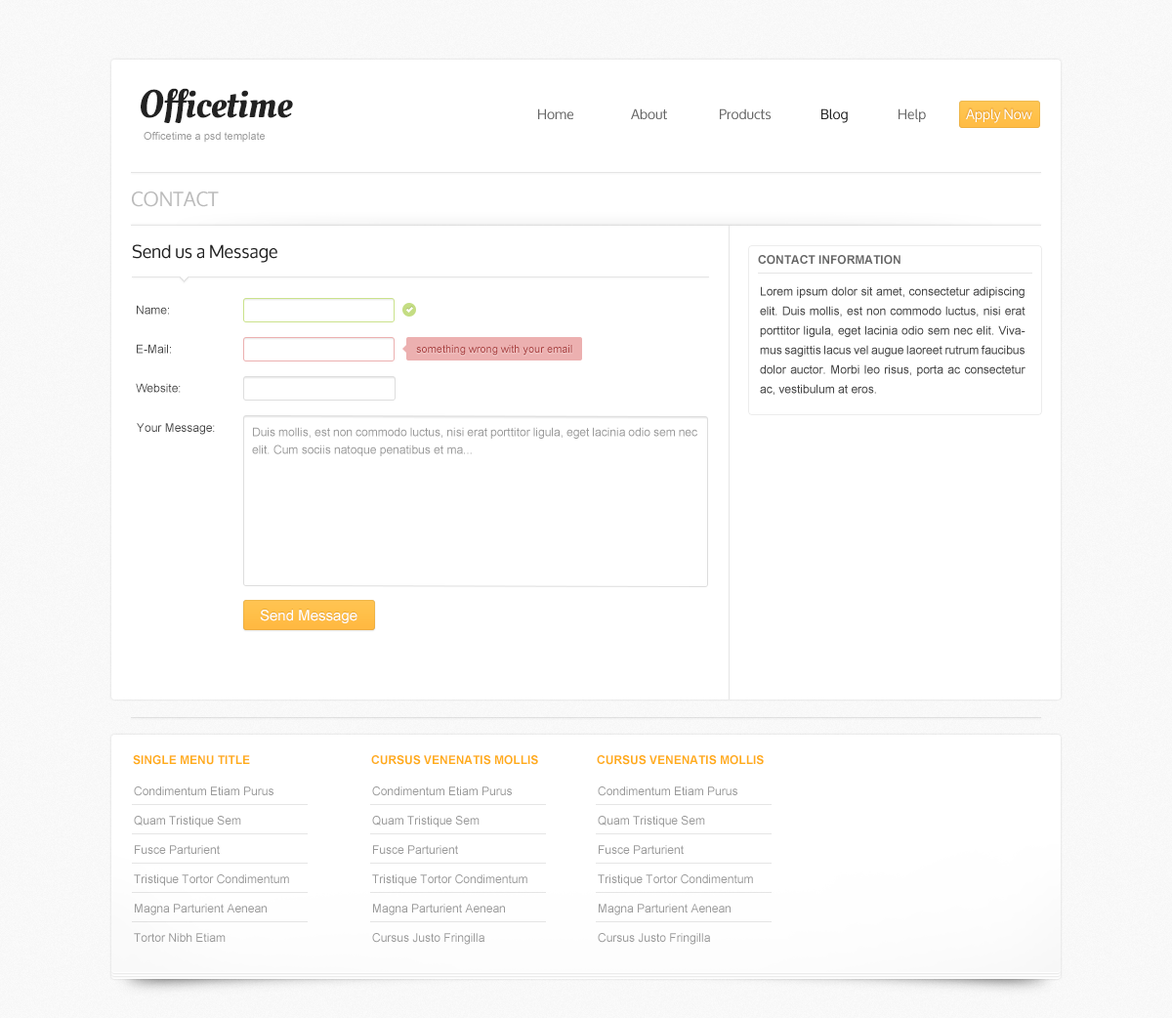
<style>
.page{position:relative;width:1172px;height:1018px;background:#ffffff}
.page>*{position:absolute;margin:0}
.t1{font:39.1px "OleoScript-Regular";color:#222222}
.t2{font:13.7px "Oxygen";color:#666666}
.t3{font:13.7px "Oxygen";color:#222222}
.t4{font:13.7px "Oxygen";color:#ffffff}
.t5{font:10.7px "ArialMT";color:#999999}
.t6{font:19.5px "Oxygen";color:#bbbbbb;text-transform:uppercase}
.t7{font:17.6px "Oxygen";color:#222222}
.t8{font:11.7px "Arial-BoldMT";color:#666666;text-transform:uppercase}
.t9{font:11.7px/19.5px "ArialMT";color:#444444}
.t10{font:11.7px "ArialMT";color:#444444}
.t11{font:10.7px "ArialMT";color:#ac4040}
.t12{font:11.7px/17.6px "ArialMT";color:#999999}
.t13{font:14.6px "ArialMT";color:#ffffff}
.t14{font:11.7px "Arial-BoldMT";color:#ffad19}
.t15{font:11.7px "Arial-BoldMT";color:#ffad19;text-transform:uppercase}
.t16{font:11.7px/29.3px "ArialMT";color:#999999}
</style>
<div class="page">
<p class="t1" style="left:141px;top:88px;width:152px;height:35px">Officetime</p>
<p class="t2" style="left:538px;top:108px;width:35px;height:12px">Home</p>
<p class="t2" style="left:631px;top:108px;width:36px;height:12px">About</p>
<p class="t2" style="left:720px;top:108px;width:50px;height:12px">Products</p>
<p class="t3" style="left:821px;top:108px;width:27px;height:15px">Blog</p>
<p class="t2" style="left:898px;top:108px;width:28px;height:14px">Help</p>
<p class="t4" style="left:966px;top:108px;width:66px;height:15px">Apply Now</p>
<p class="t5" style="left:144px;top:132px;width:121px;height:11px">Officetime a psd template</p>
<p class="t6" style="left:132px;top:191px;width:87px;height:16px">Contact</p>
<p class="t7" style="left:132px;top:244px;width:145px;height:19px">Send us a Message</p>
<p class="t8" style="left:758px;top:255px;width:142px;height:10px">Contact information</p>
<p class="t9" style="left:760px;top:286px;width:265px;height:110px;text-align:justify">Lorem ipsum dolor sit amet, consectetur adipiscing elit. Duis mollis, est non commodo luctus, nisi erat porttitor ligula, eget lacinia odio sem nec elit. Vivamus sagittis lacus vel augue laoreet rutrum faucibus dolor auctor. Morbi leo risus, porta ac consectetur ac, vestibulum at eros.</p>
<p class="t10" style="left:137px;top:305px;width:32px;height:9px">Name:</p>
<p class="t10" style="left:137px;top:344px;width:34px;height:10px">E-Mail:</p>
<p class="t11" style="left:416px;top:345px;width:156px;height:10px">something wrong with your email</p>
<p class="t10" style="left:136px;top:383px;width:45px;height:10px">Website:</p>
<p class="t10" style="left:137px;top:423px;width:78px;height:12px">Your Message:</p>
<p class="t12" style="left:252px;top:427px;width:445px;height:29px;text-align:justify">Duis mollis, est non commodo luctus, nisi erat porttitor ligula, eget lacinia odio sem nec elit. Cum sociis natoque penatibus et ma...</p>
<p class="t13" style="left:260px;top:609px;width:97px;height:14px">Send Message</p>
<p class="t14" style="left:133px;top:755px;width:117px;height:10px">SINGLE MENU TITLE</p>
<p class="t15" style="left:371px;top:755px;width:167px;height:10px">Cursus Venenatis Mollis</p>
<p class="t15" style="left:597px;top:755px;width:167px;height:10px">Cursus Venenatis Mollis</p>
<p class="t16" style="left:134px;top:786px;width:155px;height:155px">Condimentum Etiam Purus<br>Quam Tristique Sem<br>Fusce Parturient<br>Tristique Tortor Condimentum<br>Magna Parturient Aenean<br>Tortor Nibh Etiam</p>
<p class="t16" style="left:372px;top:786px;width:155px;height:158px">Condimentum Etiam Purus<br>Quam Tristique Sem<br>Fusce Parturient<br>Tristique Tortor Condimentum<br>Magna Parturient Aenean<br>Cursus Justo Fringilla</p>
<p class="t16" style="left:598px;top:786px;width:155px;height:158px">Condimentum Etiam Purus<br>Quam Tristique Sem<br>Fusce Parturient<br>Tristique Tortor Condimentum<br>Magna Parturient Aenean<br>Cursus Justo Fringilla</p>
</div>
